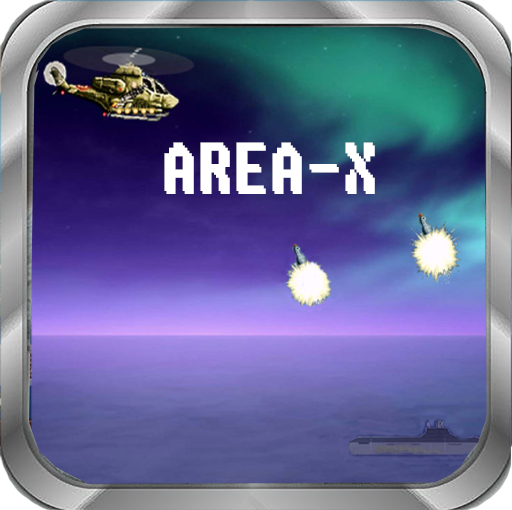
<style>
.page{position:relative;width:512px;height:510px}
.page>*{position:absolute;margin:0}
.t1{font:69.1px "Fixedsys";color:#ffffff;scale:0.84 1}
</style>
<div class="page">
<p class="t1" style="left:164px;top:142px;width:209px;height:49px">AREA-X</p>
<p class="t1" style="left:166px;top:145px;width:209px;height:49px">AREA-X</p>
</div>
